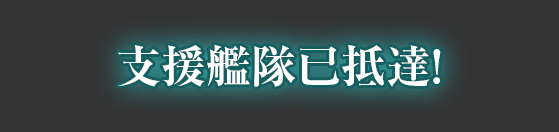
<style>
.page{position:relative;width:559px;height:132px;background:#333333}
.page>*{position:absolute;margin:0}
.t1{font:45px "RyuminPr6N-ExBold";color:#ffffff}
</style>
<div class="page">
<p class="t1" style="left:118px;top:44px;width:323px;height:43px">支援艦隊已抵達!</p>
</div>
